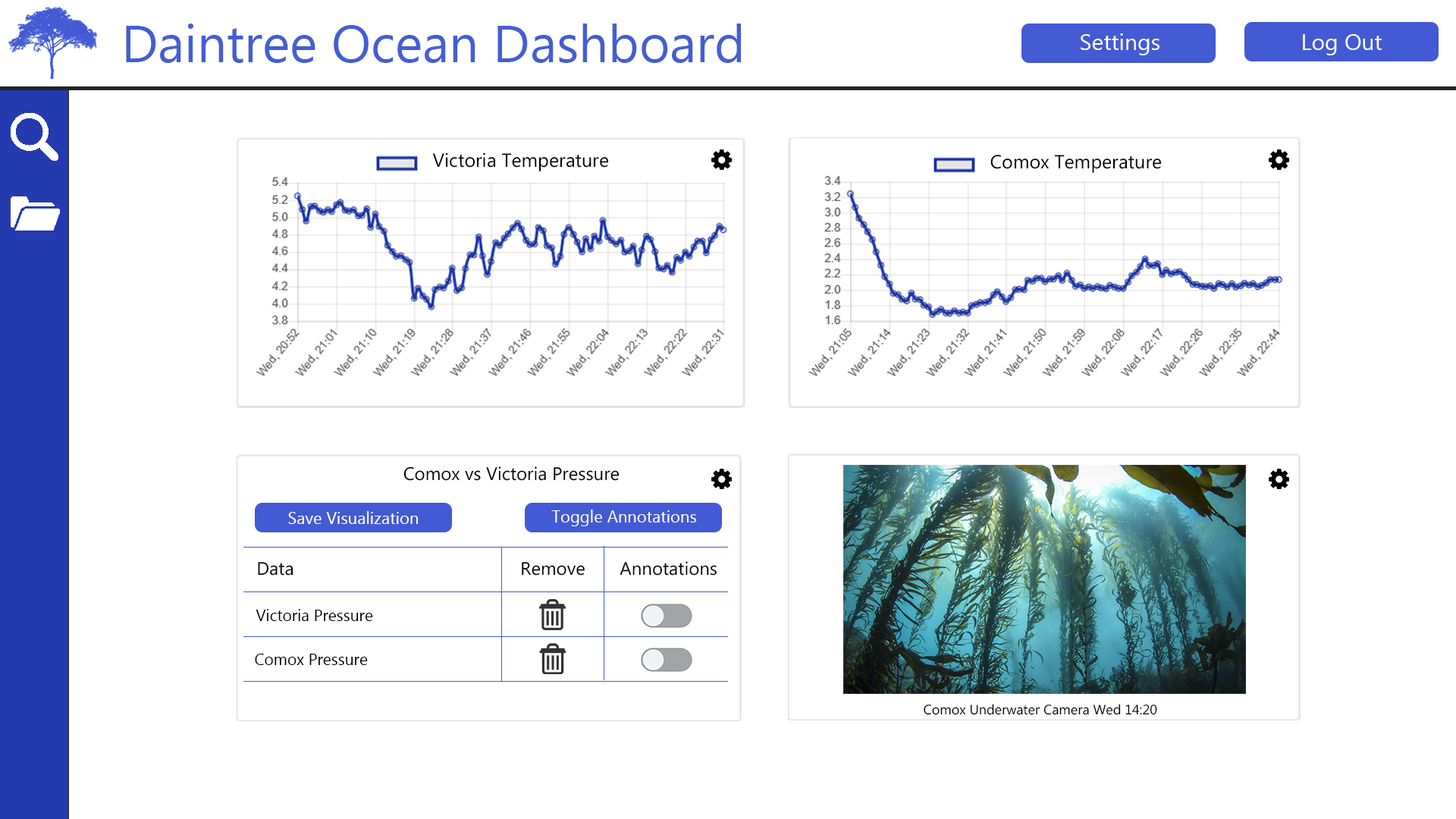
<style>
.page{position:relative;width:1456px;height:819px;background:#ffffff}
.page>*{position:absolute;margin:0}
.t1{font:52.3px "MyanmarText";color:#455dd4}
.t2{font:22.7px "MyanmarText";color:#ffffff}
.t3{font:19px "MyanmarText";color:#000000}
.t4{font:18.2px "MyanmarText";color:#000000}
.t5{font:16.7px "MyanmarText";color:#ffffff}
.t6{font:16px "MyanmarText";color:#000000}
.t7{font:13.6px "MyanmarText";color:#000000}
</style>
<div class="page">
<p class="t1" style="left:126px;top:24px;width:615px;height:39px">Daintree Ocean Dashboard</p>
<p class="t2" style="left:1081px;top:33px;width:78px;height:22px">Settings</p>
<p class="t2" style="left:1303px;top:34px;width:79px;height:21px">Log Out</p>
<p class="t3" style="left:432px;top:152px;width:177px;height:19px">Victoria Temperature</p>
<p class="t3" style="left:990px;top:155px;width:172px;height:18px">Comox Temperature</p>
<p class="t4" style="left:403px;top:466px;width:217px;height:15px">Comox vs Victoria Pressure</p>
<p class="t5" style="left:551px;top:510px;width:145px;height:16px">Toggle Annotations</p>
<p class="t5" style="left:288px;top:511px;width:130px;height:13px">Save Visualization</p>
<p class="t4" style="left:258px;top:561px;width:459px;height:15px">Data                   Remove  Annotations</p>
<p class="t6" style="left:256px;top:609px;width:117px;height:12px">Victoria Pressure</p>
<p class="t6" style="left:255px;top:654px;width:113px;height:11px">Comox Pressure</p>
<p class="t7" style="left:924px;top:704px;width:233px;height:11px">Comox Underwater Camera Wed 14:20</p>
</div>
